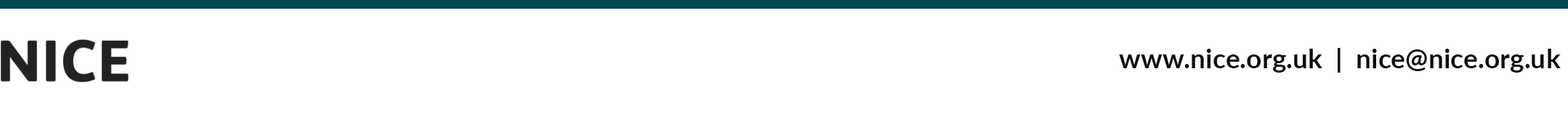
<style>
.page{position:relative;width:1568px;height:114px;background:#ffffff}
.page>*{position:absolute;margin:0}
.t1{font:27.1px "Lato-Bold";color:#0e0e0e}
</style>
<div class="page">
<p class="t1" style="left:1119px;top:48px;width:442px;height:25px">www.nice.org.uk  |  nice@nice.org.uk</p>
</div>
